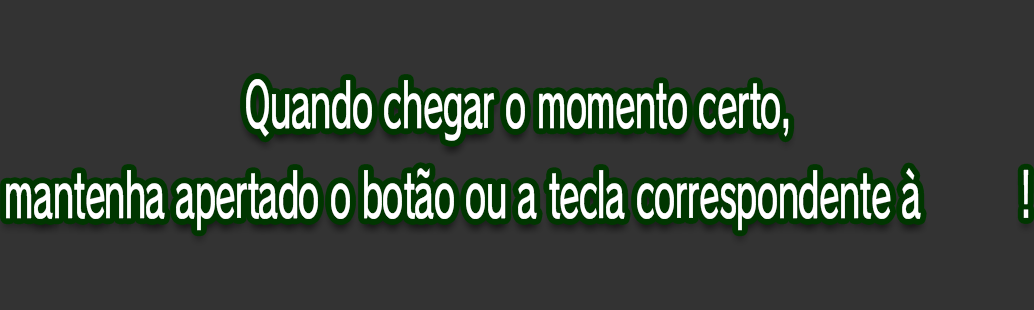
<style>
.page{position:relative;width:1034px;height:310px;background:#333333}
.page>*{position:absolute;margin:0}
.t1{font:61.3px/90.7px "RodinPro-DB";letter-spacing:-0.022em;color:#ffffff;scale:0.55 1}
</style>
<div class="page">
<p class="t1" style="left:6px;top:79px;width:1023px;height:152px;text-align:center">Quando chegar o momento certo,<br>mantenha apertado o botão ou a tecla correspondente à         !</p>
</div>
